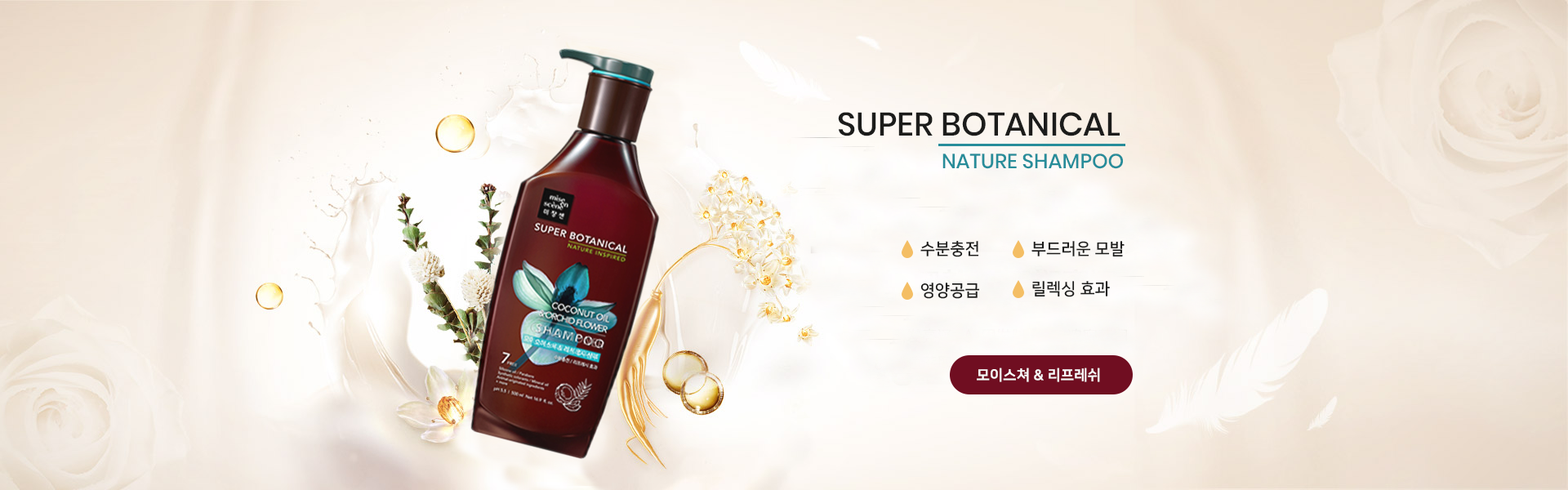
<style>
.page{position:relative;width:1568px;height:490px}
.page>*{position:absolute;margin:0}
.t1{font:32.7px "Poppins-Medium";color:#1c1c1b}
.t2{font:20.4px "Poppins-Medium";color:#278d9a}
.t3{font:16.3px "NanumSquareB";color:#1c1c1b}
.t4{font:14.7px "NanumSquareEB";color:#f9f9f9}
</style>
<div class="page">
<p class="t1" style="left:838px;top:112px;width:282px;height:24px">SUPER BOTANICAL</p>
<p class="t2" style="left:942px;top:154px;width:181px;height:15px">NATURE SHAMPOO</p>
<p class="t3" style="left:920px;top:240px;width:59px;height:17px">수분충전</p>
<p class="t3" style="left:1031px;top:241px;width:94px;height:16px">부드러운 모발</p>
<p class="t3" style="left:1032px;top:281px;width:78px;height:16px">릴렉싱 효과</p>
<p class="t3" style="left:920px;top:283px;width:60px;height:16px">영양공급</p>
<p class="t4" style="left:977px;top:368px;width:123px;height:14px">모이스쳐 &amp; 리프레쉬</p>
</div>
